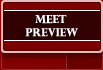
<style>
.page{position:relative;width:103px;height:70px;background:#320000}
.page>*{position:absolute;margin:0}
.t1{font:11px "PerpetuaTitlingMT-Bold";color:#ffffff}
.t2{font:11px "Tahoma";color:#ffffff}
</style>
<div class="page">
<p class="t1" style="left:25px;top:14px;width:53px;height:23px"><span class="t2">     </span>MEET <br>  preview</p>
</div>
